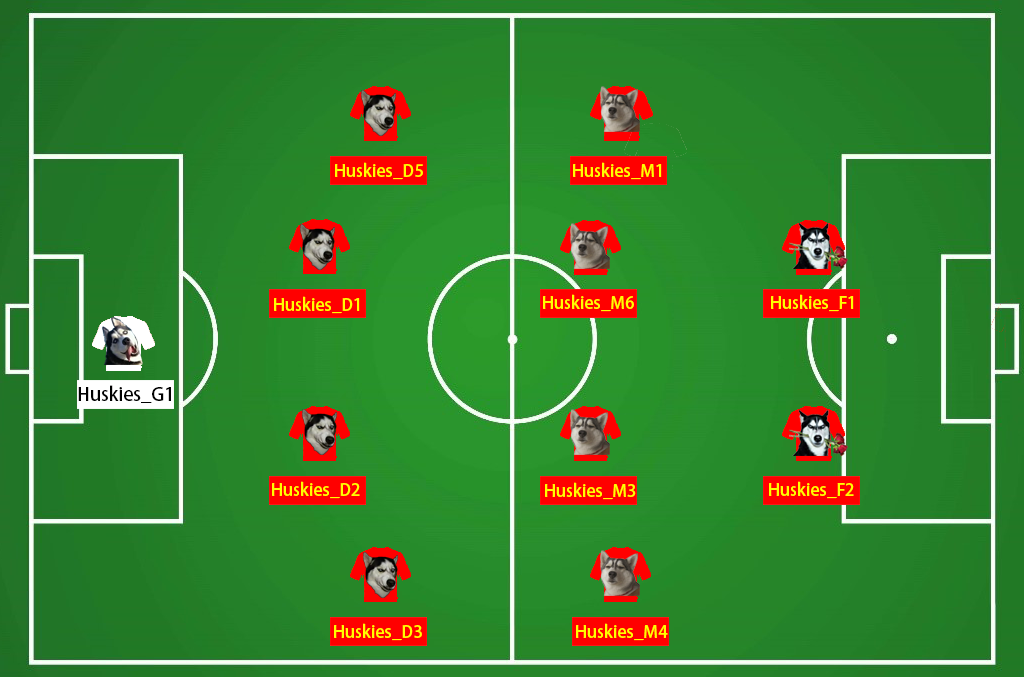
<style>
.page{position:relative;width:1024px;height:677px}
.page>*{position:absolute;margin:0}
.t1{font:16.8px "AdobeHeitiStd-Regular";color:#ffff00}
.t2{font:18.3px "AdobeHeitiStd-Regular";color:#000000}
</style>
<div class="page">
<p class="t1" style="left:335px;top:162px;width:88px;height:18px">Huskies_D5</p>
<p class="t1" style="left:573px;top:162px;width:89px;height:18px">Huskies_M1</p>
<p class="t1" style="left:543px;top:294px;width:91px;height:18px">Huskies_M6</p>
<p class="t1" style="left:771px;top:294px;width:83px;height:18px">Huskies_F1</p>
<p class="t1" style="left:274px;top:296px;width:86px;height:18px">Huskies_D1</p>
<p class="t2" style="left:78px;top:385px;width:93px;height:18px">Huskies_G1</p>
<p class="t1" style="left:272px;top:481px;width:88px;height:18px">Huskies_D2</p>
<p class="t1" style="left:545px;top:482px;width:91px;height:18px">Huskies_M3</p>
<p class="t1" style="left:769px;top:481px;width:85px;height:18px">Huskies_F2</p>
<p class="t1" style="left:334px;top:623px;width:88px;height:18px">Huskies_D3</p>
<p class="t1" style="left:576px;top:623px;width:92px;height:18px">Huskies_M4</p>
</div>
